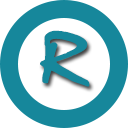
<style>
.page{position:relative;width:128px;height:128px;background:#ffffff}
.page>*{position:absolute;margin:0}
.t1{font:75px "Mistral";letter-spacing:0.18em;color:#16879b;font-weight:bold;scale:1.4 1}
</style>
<div class="page">
<p class="t1" style="left:40px;top:30px;width:50px;height:57px">R</p>
</div>
